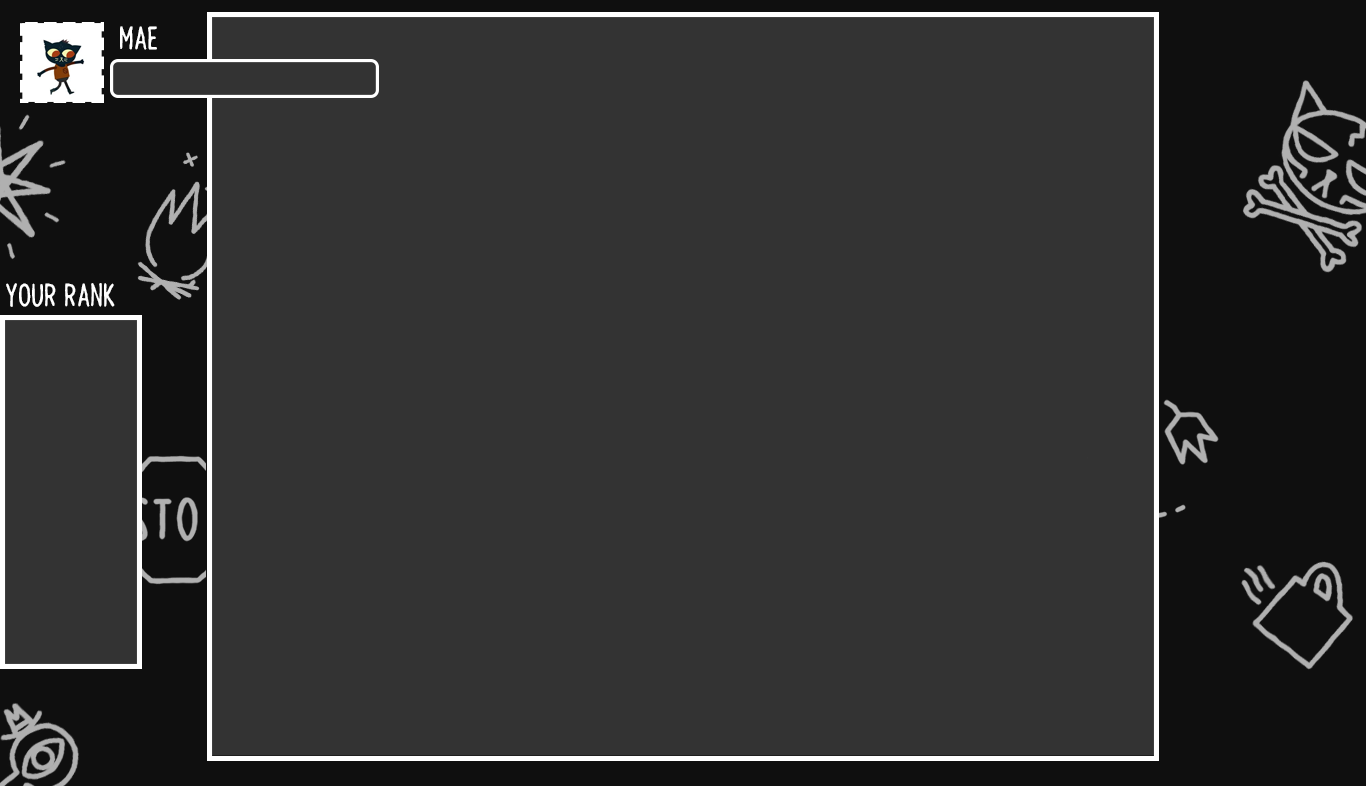
<style>
.page{position:relative;width:1366px;height:786px;background:#333333}
.page>*{position:absolute;margin:0}
.t1{font:36px "NitwP1-Regular";color:#ffffff}
</style>
<div class="page">
<p class="t1" style="left:120px;top:26px;width:37px;height:24px">Mae</p>
<p class="t1" style="left:6px;top:283px;width:109px;height:24px">Your Rank</p>
</div>
